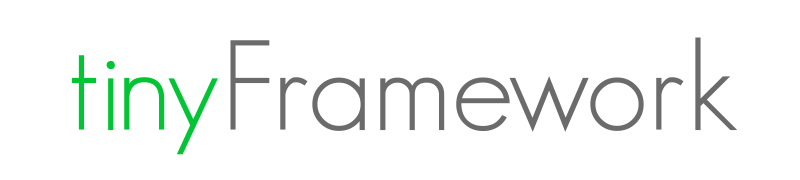
<style>
.page{position:relative;width:800px;height:180px;background:#ffffff}
.page>*{position:absolute;margin:0}
.t1{font:125px "GeosansLight";color:#6b6b6b}
.t2{font:125px "GeosansLight";color:#03c435}
</style>
<div class="page">
<p class="t1" style="left:71px;top:37px;width:667px;height:118px"><span class="t2">tiny</span>Framework</p>
</div>
